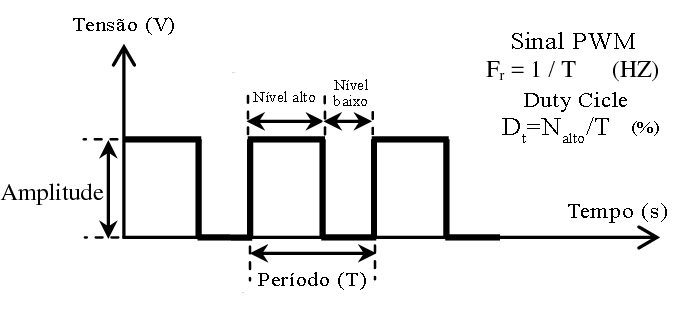
<style>
.page{position:relative;width:676px;height:317px;background:#ffffff}
.page>*{position:absolute;margin:0}
.t1{font:20.2px "TimesNewRomanPSMT";letter-spacing:0.03em;color:#000000;scale:1.09 1}
.t2{font:23.9px "TimesNewRomanPSMT";letter-spacing:0.03em;color:#000000;scale:1.09 1}
.t3{font:14.7px/16px "TimesNewRomanPSMT";letter-spacing:0.03em;color:#000000;scale:1.09 1}
.t4{font:14.7px "TimesNewRomanPSMT";letter-spacing:0.03em;color:#000000;scale:1.09 1}
.t5{font:36.8px "TimesNewRomanPSMT";letter-spacing:0.03em;color:#000000;scale:1.09 1}
.t6{font:24.8px "TimesNewRomanPSMT";letter-spacing:0.03em;color:#000000;scale:1.09 1}
.t7{font:17.5px "TimesNewRomanPSMT";letter-spacing:0.03em;color:#000000;scale:1.09 1}
</style>
<div class="page">
<p class="t1" style="left:73px;top:17px;width:101px;height:18px">Tensão (V)</p>
<p class="t2" style="left:512px;top:32px;width:123px;height:17px">Sinal PWM</p>
<p class="t3" style="left:333px;top:79px;width:35px;height:27px;text-align:center">Nível<br>baixo</p>
<p class="t4" style="left:253px;top:91px;width:62px;height:11px">Nível alto</p>
<p class="t5" style="left:524px;top:92px;width:103px;height:20px">Duty Cicle</p>
<p class="t6" style="left:502px;top:117px;width:107px;height:26px">Dt=Nalto/T</p>
<p class="t7" style="left:632px;top:121px;width:27px;height:15px">(%)</p>
<p class="t5" style="left:568px;top:203px;width:99px;height:20px">Tempo (s)</p>
<p class="t1" style="left:258px;top:272px;width:108px;height:18px">Período (T)</p>
</div>
